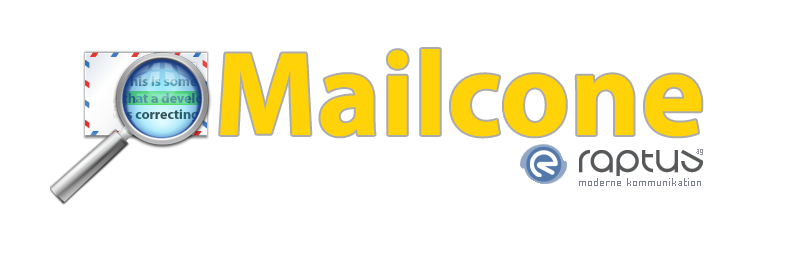
<style>
.page{position:relative;width:800px;height:260px;background:#ffffff}
.page>*{position:absolute;margin:0}
.t1{font:121px "MyriadPro-Bold";color:#ffd307}
.t2{font:14px "MyriadPro-Bold"}
</style>
<div class="page">
<p class="t1" style="left:220px;top:49px;width:482px;height:88px">Mailcone</p>
<p class="t2" style="left:122px;top:76px;width:82px;height:46px">This is some <br>that a develo<br>is correcting</p>
</div>
